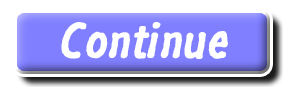
<style>
.page{position:relative;width:283px;height:87px;background:#ffffff}
.page>*{position:absolute;margin:0}
.t1{font:49px "SegoeMarker";color:#ffffff;font-weight:bold;font-style:italic}
</style>
<div class="page">
<p class="t1" style="left:61px;top:22px;width:167px;height:37px">Continue</p>
</div>
